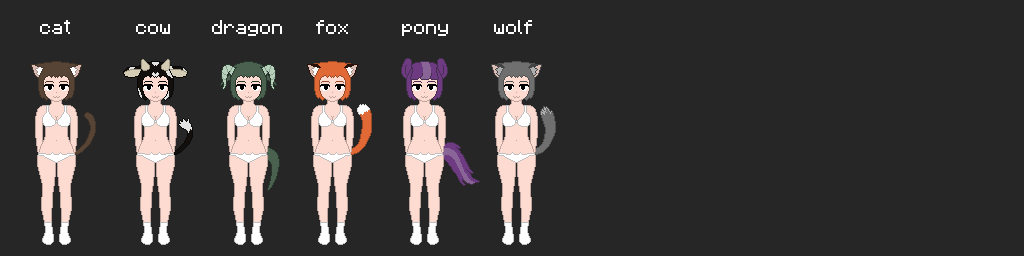
<style>
.page{position:relative;width:1024px;height:256px;background:#262626}
.page>*{position:absolute;margin:0}
.t1{font:16px "Minecraftia-Regular";color:#ffffff}
</style>
<div class="page">
<p class="t1" style="left:40px;top:20px;width:492px;height:16px">cat                cow          dragon        fox             pony           wolf</p>
</div>
